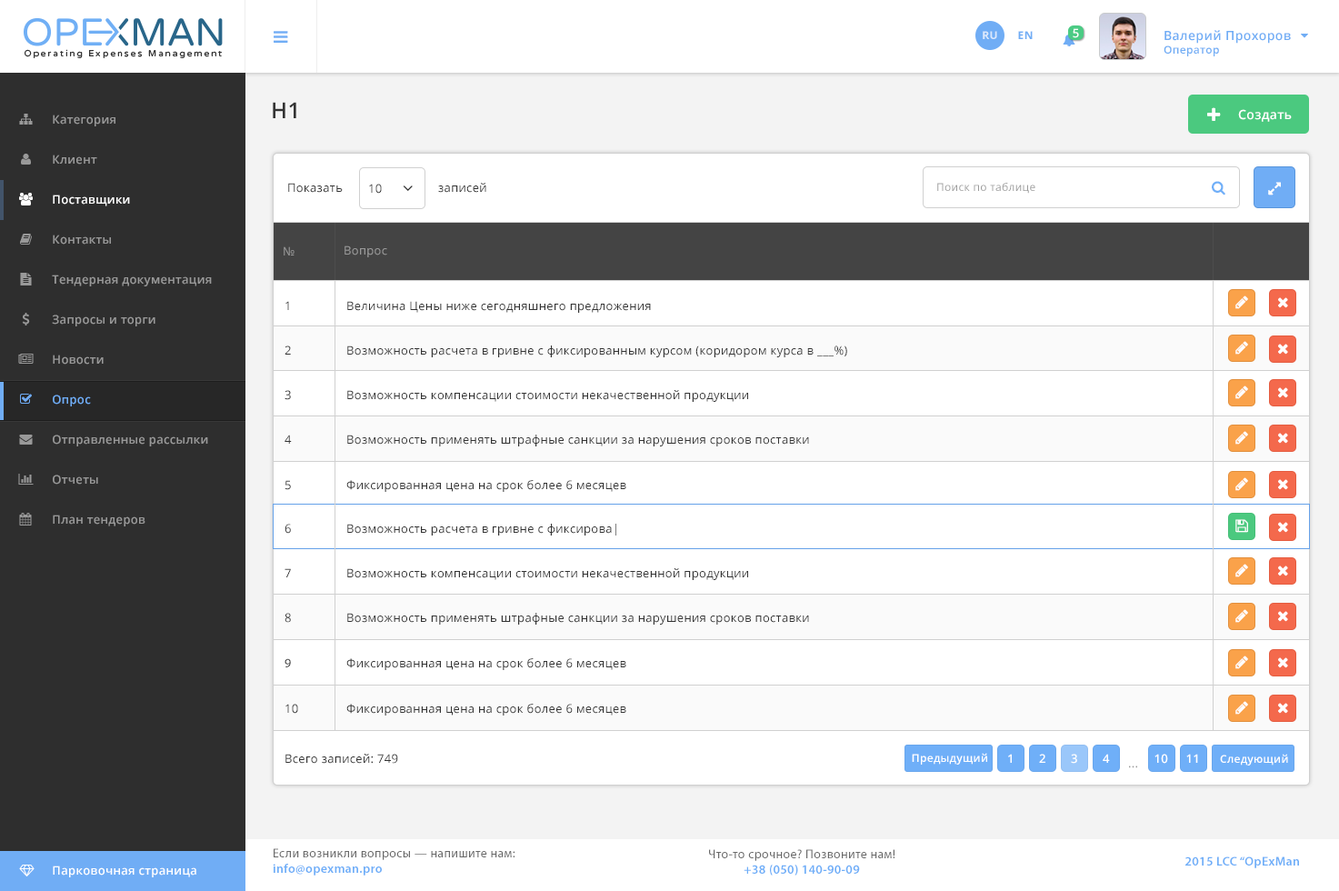
<style>
.page{position:relative;width:1339px;height:891px;background:#ffffff}
.page>*{position:absolute;margin:0}
.t1{font:11.8px "OpenSans-Semibold";letter-spacing:0.025em;color:#ffffff}
.t2{font:12.7px "OpenSans-Semibold";letter-spacing:0.025em;color:#70adf5}
.t3{font:10.9px "OpenSans-Semibold";letter-spacing:0.025em;color:#70adf5}
.t4{font:10.9px "OpenSans-Bold";letter-spacing:0.025em;color:#dbe8fc;text-transform:uppercase}
.t5{font:10.9px "OpenSans-Bold";letter-spacing:0.025em;color:#70adf5;text-transform:uppercase}
.t6{font:21.8px "OpenSans-Semibold";letter-spacing:0.025em;color:#333333}
.t7{font:12.7px "OpenSans-Semibold";letter-spacing:0.025em;color:#ffffff}
.t8{font:11.8px "OpenSans-Semibold";letter-spacing:0.025em;color:#999999}
.t9{font:11.8px "OpenSans";letter-spacing:0.025em;color:#333333}
.t10{font:10.9px "OpenSans";letter-spacing:0.025em;color:#999999}
.t11{font:11.8px "OpenSans";letter-spacing:0.025em;color:#999999}
.t12{font:11.8px "OpenSans-Semibold";letter-spacing:0.025em;color:#70adf5}
.t13{font:12.7px "MyriadPro-Regular";letter-spacing:0.025em;color:#333333}
.t14{font:10.9px "OpenSans-Semibold";letter-spacing:0.025em;color:#ffffff}
.t15{font:12.7px "MyriadPro-Regular";letter-spacing:0.025em;color:#696969}
.t16{font:12.7px "MyriadPro-Semibold";letter-spacing:0.025em;color:#6eaef8}
</style>
<div class="page">
<p class="t1" style="left:1072px;top:28px;width:7px;height:10px">5</p>
<p class="t2" style="left:1163px;top:30px;width:128px;height:26px">Валерий Прохоров<br><span class="t3">Оператор</span></p>
<p class="t4" style="left:982px;top:31px;width:15px;height:8px">Ru</p>
<p class="t5" style="left:1018px;top:31px;width:14px;height:8px">EN</p>
<p class="t6" style="left:273px;top:102px;width:23px;height:16px">H1</p>
<p class="t7" style="left:1238px;top:109px;width:54px;height:13px">Создать</p>
<p class="t8" style="left:53px;top:115px;width:62px;height:11px">Категория</p>
<p class="t8" style="left:53px;top:155px;width:44px;height:10px">Клиент</p>
<p class="t9" style="left:288px;top:183px;width:55px;height:10px">Показать</p>
<p class="t9" style="left:369px;top:184px;width:13px;height:10px">10</p>
<p class="t9" style="left:438px;top:183px;width:48px;height:10px">записей</p>
<p class="t10" style="left:937px;top:183px;width:98px;height:11px">Поиск по таблице</p>
<p class="t1" style="left:53px;top:194px;width:77px;height:12px">Поставщики</p>
<p class="t8" style="left:53px;top:234px;width:58px;height:10px">Контакты</p>
<p class="t11" style="left:344px;top:245px;width:43px;height:12px">Вопрос</p>
<p class="t11" style="left:284px;top:246px;width:10px;height:9px">№</p>
<p class="t8" style="left:52px;top:274px;width:160px;height:12px">Тендерная документация</p>
<p class="t9" style="left:285px;top:301px;width:4px;height:9px">1</p>
<p class="t9" style="left:347px;top:301px;width:304px;height:12px">Величина Цены ниже сегодняшнего предложения</p>
<p class="t8" style="left:52px;top:314px;width:103px;height:12px">Запросы и торги</p>
<p class="t9" style="left:284px;top:345px;width:7px;height:9px">2</p>
<p class="t9" style="left:347px;top:345px;width:500px;height:12px">Возможность расчета в гривне с фиксированным курсом (коридором курса в ___%)</p>
<p class="t8" style="left:53px;top:354px;width:51px;height:10px">Новости</p>
<p class="t9" style="left:284px;top:390px;width:7px;height:10px">3</p>
<p class="t9" style="left:347px;top:390px;width:401px;height:12px">Возможность компенсации стоимости некачественной продукции</p>
<p class="t12" style="left:53px;top:394px;width:38px;height:12px">Опрос</p>
<p class="t8" style="left:53px;top:434px;width:155px;height:12px">Отправленные рассылки</p>
<p class="t9" style="left:284px;top:434px;width:8px;height:10px">4</p>
<p class="t9" style="left:347px;top:434px;width:462px;height:12px">Возможность применять штрафные санкции за нарушения сроков поставки</p>
<p class="t8" style="left:53px;top:474px;width:45px;height:10px">Отчеты</p>
<p class="t9" style="left:284px;top:480px;width:7px;height:10px">5</p>
<p class="t9" style="left:346px;top:480px;width:280px;height:12px">Фиксированная цена на срок более 6 месяцев</p>
<p class="t8" style="left:53px;top:514px;width:92px;height:12px">План тендеров</p>
<p class="t9" style="left:284px;top:524px;width:7px;height:10px">6</p>
<p class="t9" style="left:347px;top:524px;width:269px;height:11px">Возможность расчета в гривне с фиксирова|</p>
<p class="t9" style="left:284px;top:568px;width:7px;height:9px">7</p>
<p class="t9" style="left:347px;top:568px;width:401px;height:12px">Возможность компенсации стоимости некачественной продукции</p>
<p class="t9" style="left:284px;top:613px;width:7px;height:10px">8</p>
<p class="t9" style="left:347px;top:613px;width:462px;height:11px">Возможность применять штрафные санкции за нарушения сроков поставки</p>
<p class="t13" style="left:284px;top:658px;width:7px;height:9px">9</p>
<p class="t9" style="left:346px;top:658px;width:280px;height:12px">Фиксированная цена на срок более 6 месяцев</p>
<p class="t9" style="left:285px;top:703px;width:13px;height:10px">10</p>
<p class="t9" style="left:346px;top:703px;width:280px;height:12px">Фиксированная цена на срок более 6 месяцев</p>
<p class="t9" style="left:285px;top:753px;width:113px;height:10px">Всего записей: 749</p>
<p class="t14" style="left:912px;top:753px;width:75px;height:11px">Предыдущий</p>
<p class="t1" style="left:1008px;top:753px;width:4px;height:10px">1</p>
<p class="t1" style="left:1039px;top:753px;width:6px;height:10px">2</p>
<p class="t1" style="left:1071px;top:753px;width:6px;height:10px">3</p>
<p class="t1" style="left:1102px;top:753px;width:8px;height:10px">4</p>
<p class="t1" style="left:1154px;top:753px;width:14px;height:10px">10</p>
<p class="t1" style="left:1186px;top:753px;width:12px;height:10px">11</p>
<p class="t14" style="left:1220px;top:753px;width:68px;height:12px">Следующий</p>
<p class="t11" style="left:1129px;top:765px;width:8px;height:3px">...</p>
<p class="t15" style="left:273px;top:848px;width:242px;height:27px">Если возникли вопросы — напишите нам:<br><span class="t16">info@opexman.pro</span></p>
<p class="t15" style="left:709px;top:849px;width:186px;height:26px;text-align:center">Что-то срочное? Позвоните нам!<br><span class="t16">+38 (050) 140-90-09</span></p>
<p class="t16" style="left:1185px;top:856px;width:114px;height:12px">2015 LCC “OpExMan</p>
<p class="t1" style="left:53px;top:865px;width:143px;height:12px">Парковочная страница</p>
</div>
